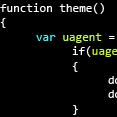
<style>
.page{position:relative;width:117px;height:117px;background:#000000}
.page>*{position:absolute;margin:0}
.t1{font:12px "Consolas";color:#ffffff}
.t2{font:12px "Consolas";color:#33ffff}
.t3{font:12px "Consolas";color:#ccff33}
.t4{font:12px "Consolas";color:#ccff00}
</style>
<div class="page">
<p class="t1" style="left:0px;top:3px;width:117px;height:112px">function theme()<br>{<br> <span class="t2">var </span><span class="t3">uagent </span>= navigator.userAgent.toLowerCase();<br>  if(<span class="t4">uagent</span>.search(”iphone”) == “iphone”)<br>  {<br>   document.bgColor = '#fff';<br>   document.getElementById("banner").style.backgroundImage = "url(/images/themes/street/brick.png)";<br>  }</p>
</div>
